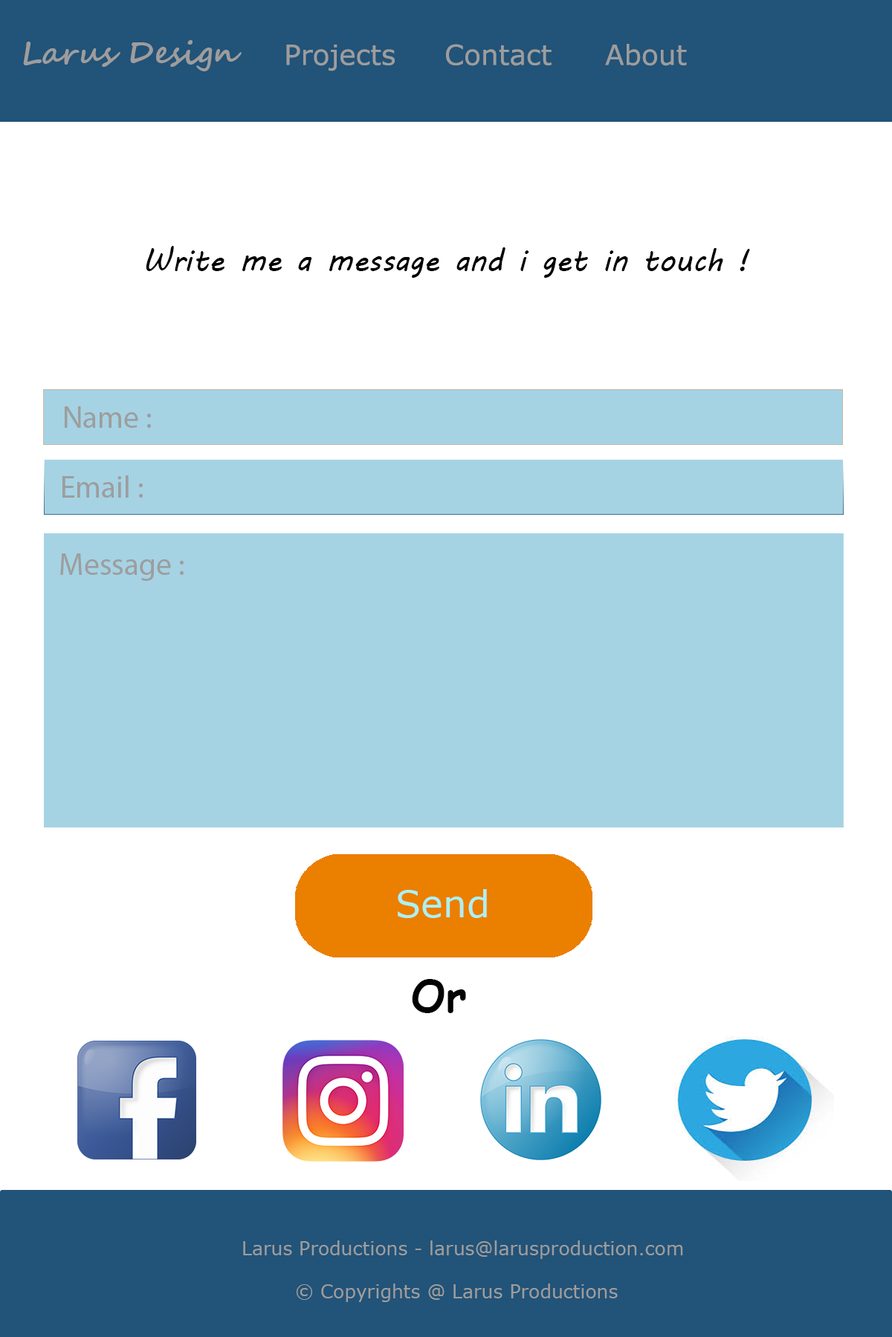
<style>
.page{position:relative;width:892px;height:1337px;background:#ffffff}
.page>*{position:absolute;margin:0}
.t1{font:31px "SegoeScript-Bold";color:#9d9d9d}
.t2{font:27.9px "MSReferenceSansSerif";color:#9d9d9d}
.t3{font:31px "MVBoli";color:#030303}
.t4{font:31px "MyriadPro-Regular";color:#9d9d9d}
.t5{font:37.2px "MSReferenceSansSerif";color:#acf0f2}
.t6{font:43.3px "ComicSansMS-Bold";color:#030303}
.t7{font:18.6px "MSReferenceSansSerif";color:#9d9d9d}
</style>
<div class="page">
<p class="t1" style="left:23px;top:40px;width:218px;height:31px">Larus Design</p>
<p class="t2" style="left:286px;top:44px;width:401px;height:27px">Projects  Contact    About</p>
<p class="t3" style="left:146px;top:246px;width:604px;height:32px">Write me a message and i get in touch !</p>
<p class="t4" style="left:65px;top:406px;width:86px;height:22px">Name :</p>
<p class="t4" style="left:62px;top:476px;width:81px;height:22px">Email :</p>
<p class="t4" style="left:60px;top:554px;width:124px;height:27px">Message :</p>
<p class="t5" style="left:398px;top:889px;width:89px;height:29px">Send</p>
<p class="t6" style="left:412px;top:979px;width:54px;height:34px">Or</p>
<p class="t7" style="left:243px;top:1241px;width:440px;height:18px">Larus Productions - larus@larusproduction.com</p>
<p class="t7" style="left:296px;top:1284px;width:321px;height:18px">© Copyrights @ Larus Productions</p>
</div>
